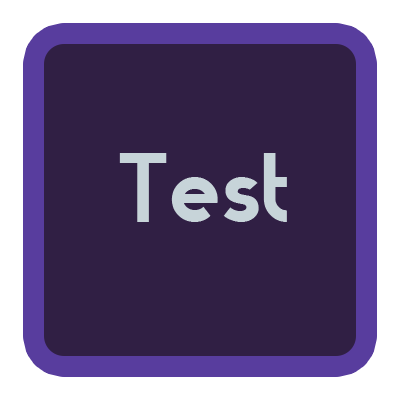
<style>
.page{position:relative;width:400px;height:400px;background:#301f44}
.page>*{position:absolute;margin:0}
.t1{font:85.6px "Moderna";color:#c7d4d9}
</style>
<div class="page">
<p class="t1" style="left:119px;top:153px;width:168px;height:69px">Test</p>
</div>
